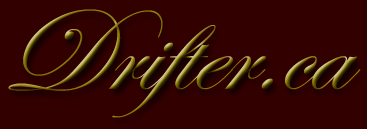
<style>
.page{position:relative;width:367px;height:129px;background:#330000}
.page>*{position:absolute;margin:0}
.t1{font:120px "EdwardianScriptITC";letter-spacing:-0.005em;font-style:italic}
</style>
<div class="page">
<p class="t1" style="left:8px;top:9px;width:353px;height:109px">Drifter.ca</p>
</div>
